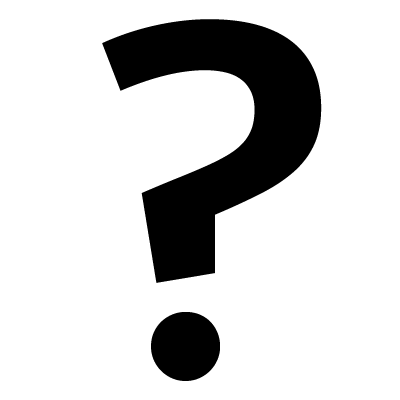
<style>
.page{position:relative;width:400px;height:400px;background:#ffffff}
.page>*{position:absolute;margin:0}
.t1{font:500px "Alef-Bold";color:#000000}
</style>
<div class="page">
<p class="t1" style="left:102px;top:19px;width:220px;height:362px">?</p>
</div>
